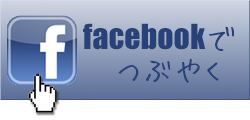
<style>
.page{position:relative;width:250px;height:120px}
.page>*{position:absolute;margin:0}
.t1{font:32px/30px "Impact";color:#284279}
.t2{font:32px/30px "HuiFontP";color:#284279}
</style>
<div class="page">
<p class="t1" style="left:83px;top:23px;width:151px;height:60px">facebook<span class="t2">で<br>　つぶやく</span></p>
</div>
